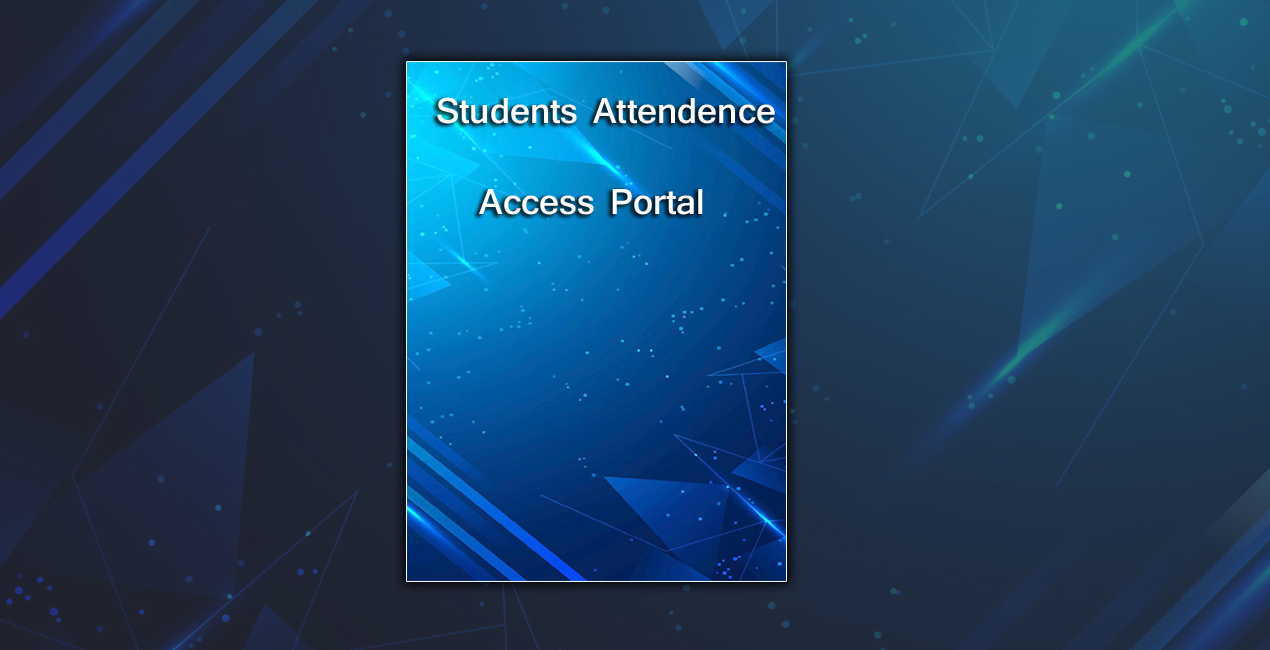
<style>
.page{position:relative;width:1270px;height:650px}
.page>*{position:absolute;margin:0}
.t1{font:37.7px "Shruti-Bold";color:#ffffff}
</style>
<div class="page">
<p class="t1" style="left:437px;top:97px;width:338px;height:118px">Students Attendence <br><br>   Access Portal</p>
</div>
